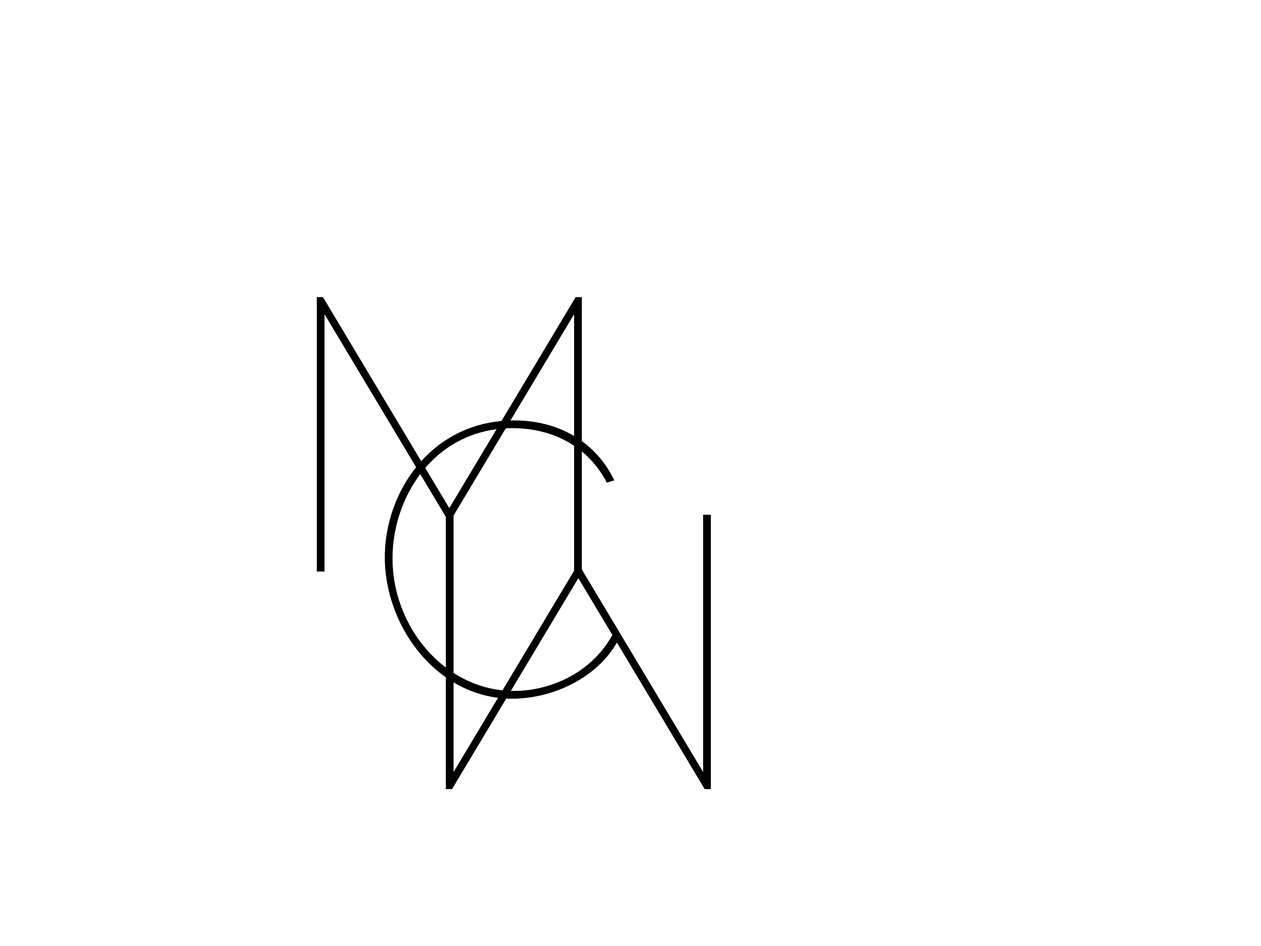
<style>
.page{position:relative;width:1261px;height:946px;background:#ffffff}
.page>*{position:absolute;margin:0}
.t1{font:386.3px "Raleway-Thin";color:#000000}
</style>
<div class="page">
<p class="t1" style="left:317px;top:297px;width:265px;height:274px">M</p>
<p class="t1" style="left:385px;top:420px;width:236px;height:278px">C</p>
<p class="t1" style="left:446px;top:515px;width:265px;height:274px">M</p>
</div>
